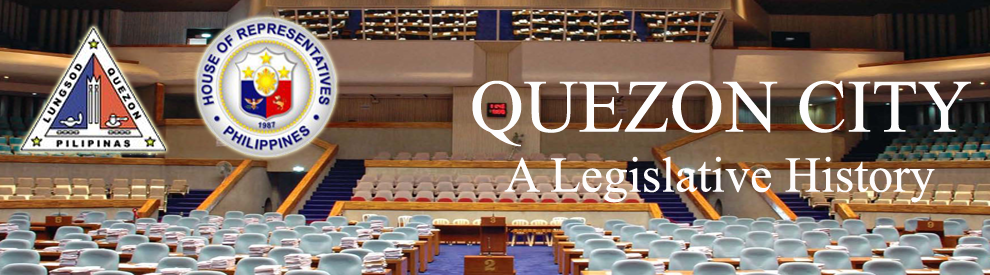
<style>
.page{position:relative;width:990px;height:275px}
.page>*{position:absolute;margin:0}
.t1{font:50px "TimesNewRomanPSMT";color:#fdfcfc}
.t2{font:75px "TimesNewRomanPSMT";color:#fdfdfd}
</style>
<div class="page">
<p class="t1" style="left:472px;top:80px;width:499px;height:123px;text-align:center"><span class="t2">QUEZON CITY<br></span>A Legislative History</p>
</div>
